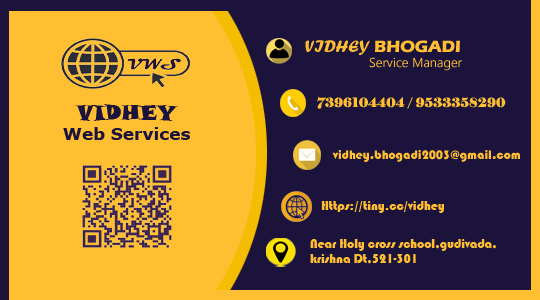
<style>
.page{position:relative;width:540px;height:300px;background:#ffbf31}
.page>*{position:absolute;margin:0}
.t1{font:16.9px "ErasITC-Bold";color:#ffbf31}
.t2{font:16.9px "ForteMT";color:#ffbf31}
.t3{font:12.7px "Gadugi";color:#ffbf31}
.t4{font:12.7px "Elephant-Regular";color:#ffbf31}
.t5{font:16.9px "Verdana-Bold";color:#1b133c}
.t6{font:21.2px "SnapITC-Regular";color:#1b133c}
.t7{font:12.7px "Bauhaus93";color:#ffbf31}
</style>
<div class="page">
<p class="t1" style="left:305px;top:40px;width:155px;height:15px"><span class="t2">VIDHEY </span>BHOGADI</p>
<p class="t3" style="left:369px;top:57px;width:93px;height:14px">Service Manager</p>
<p class="t4" style="left:317px;top:96px;width:189px;height:13px">7396104404 / 9533358290</p>
<p class="t5" style="left:63px;top:104px;width:127px;height:36px;text-align:center"><span class="t6">VIDHEY<br></span>Web Services</p>
<p class="t7" style="left:332px;top:150px;width:188px;height:12px">vidhey.bhogadi2003@gmail.com</p>
<p class="t7" style="left:321px;top:201px;width:123px;height:12px">Https://tiny.cc/vidhey</p>
<p class="t7" style="left:310px;top:239px;width:186px;height:25px">Near Holy cross school,gudivada,<br>krishna Dt,521-301</p>
</div>
